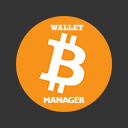
<style>
.page{position:relative;width:128px;height:128px;background:#333333}
.page>*{position:absolute;margin:0}
.t1{font:7.6px "Rockwell-Bold";color:#ffffff}
.t2{font:7.6px "GillSansMT-Bold";color:#ffffff}
</style>
<div class="page">
<p class="t1" style="left:50px;top:24px;width:34px;height:7px;rotate:1deg">WALLET</p>
<p class="t2" style="left:43px;top:97px;width:42px;height:6px">MANAGER</p>
</div>
